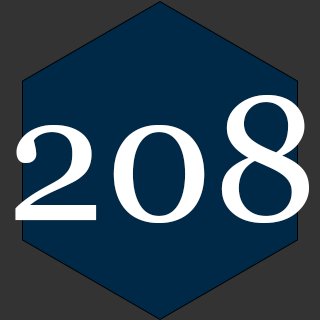
<style>
.page{position:relative;width:320px;height:320px;background:#002948}
.page>*{position:absolute;margin:0}
.t1{font:176px "Georgia";color:#ffffff}
</style>
<div class="page">
<p class="t1" style="left:15px;top:95px;width:294px;height:128px">208</p>
</div>
